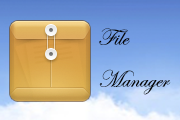
<style>
.page{position:relative;width:180px;height:120px}
.page>*{position:absolute;margin:0}
.t1{font:24px "EdwardianScriptITC";color:#080808}
</style>
<div class="page">
<p class="t1" style="left:99px;top:28px;width:72px;height:67px">File<br>Manager</p>
</div>
